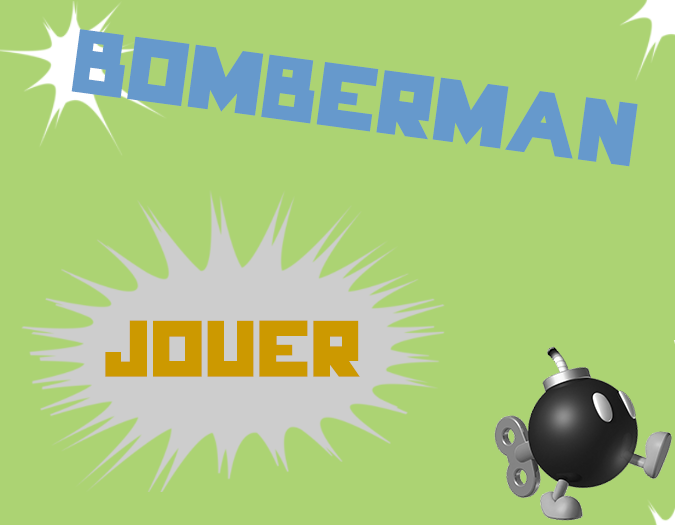
<style>
.page{position:relative;width:675px;height:525px;background:#acd373}
.page>*{position:absolute;margin:0}
.t1{font:83.3px "HungerGames";color:#6699cc}
.t2{font:74.5px "HungerGames";color:#cc9900}
</style>
<div class="page">
<p class="t1" style="left:71px;top:29px;width:567px;height:138px;rotate:8deg">BombermAn</p>
<p class="t2" style="left:105px;top:320px;width:255px;height:57px">jouer</p>
</div>
